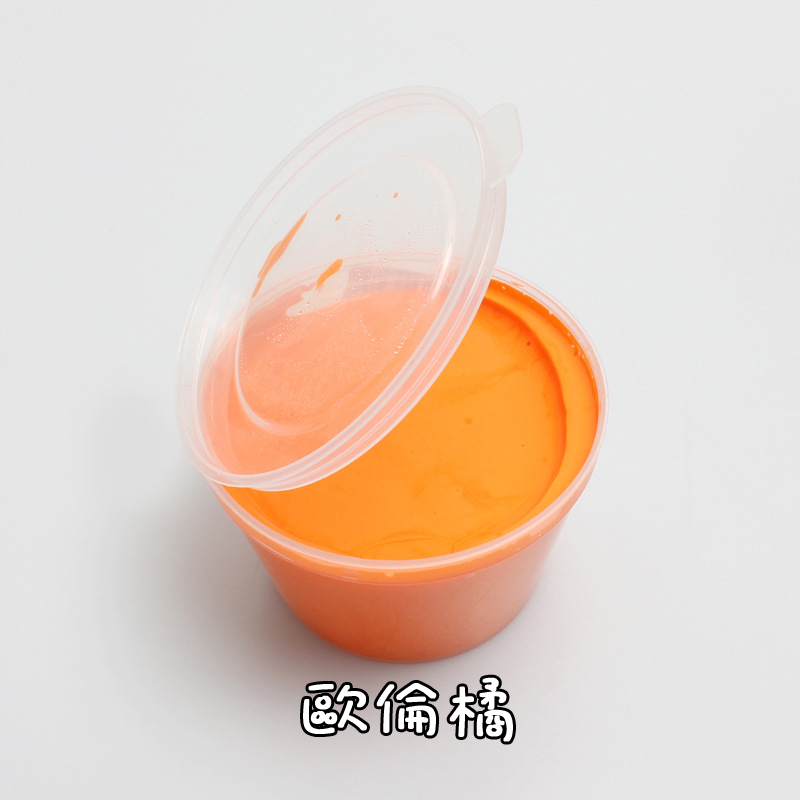
<style>
.page{position:relative;width:800px;height:800px}
.page>*{position:absolute;margin:0}
.t1{font:72px "DFPao-W4-WINP-BF";color:#ffffff;font-weight:bold}
</style>
<div class="page">
<p class="t1" style="left:303px;top:677px;width:210px;height:65px">歐倫橘</p>
</div>
